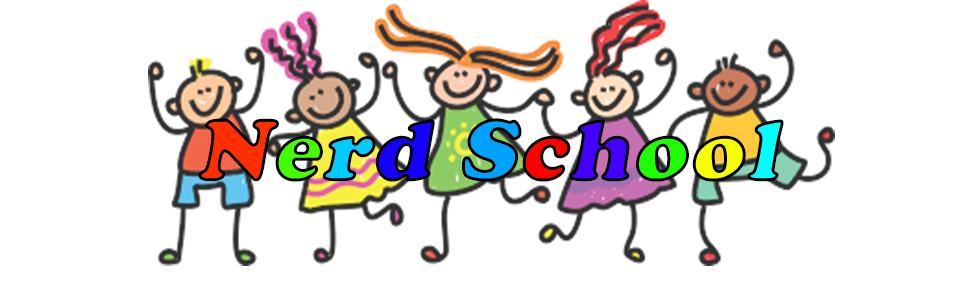
<style>
.page{position:relative;width:960px;height:300px;background:#ffffff}
.page>*{position:absolute;margin:0}
.t1{font:90px "CooperBlack";color:#ff2f00;font-weight:bold;font-style:italic}
.t2{font:90px "CooperBlack";color:#44ff00;font-weight:bold;font-style:italic}
.t3{font:90px "CooperBlack";color:#00ccff;font-weight:bold;font-style:italic}
.t4{font:90px "CooperBlack";color:#1500ff;font-weight:bold;font-style:italic}
.t5{font:90px "CooperBlack";color:#00a2ff;font-weight:bold;font-style:italic}
.t6{font:90px "CooperBlack";color:#ff0000;font-weight:bold;font-style:italic}
.t7{font:90px "CooperBlack";color:#4400ff;font-weight:bold;font-style:italic}
.t8{font:90px "CooperBlack";color:#1eff00;font-weight:bold;font-style:italic}
.t9{font:90px "CooperBlack";color:#f6ff00;font-weight:bold;font-style:italic}
.t10{font:90px "CooperBlack";color:#00ffff;font-weight:bold;font-style:italic}
</style>
<div class="page">
<p class="t1" style="left:198px;top:118px;width:586px;height:64px">N<span class="t2">e</span><span class="t3">r</span><span class="t4">d </span><span class="t5">S</span><span class="t6">c</span><span class="t7">h</span><span class="t8">o</span><span class="t9">o</span><span class="t10">l</span></p>
</div>
